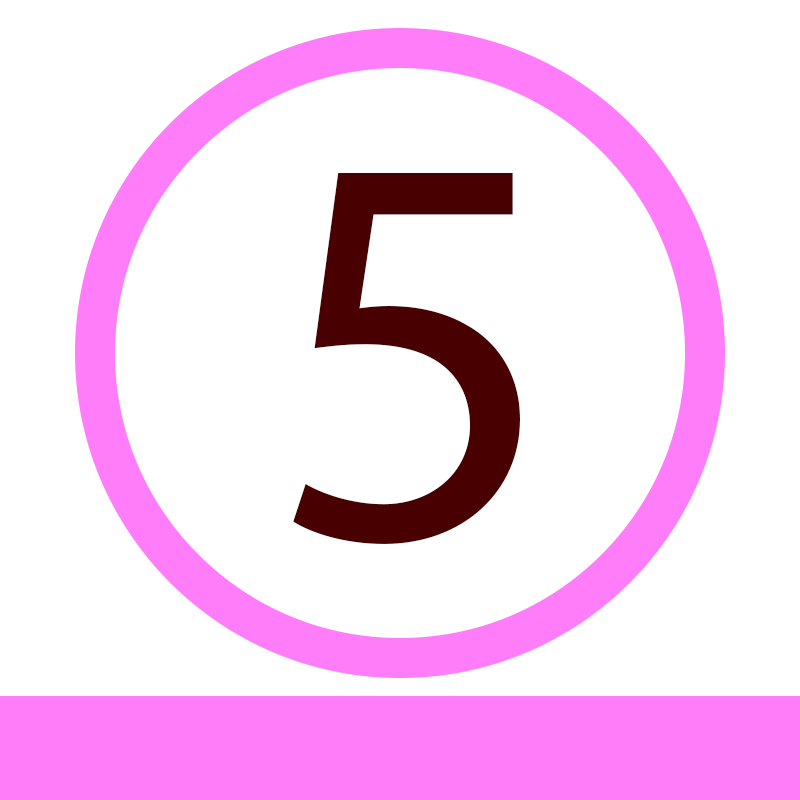
<style>
.page{position:relative;width:800px;height:800px;background:#ffffff}
.page>*{position:absolute;margin:0}
.t1{font:561px "MyriadPro-Regular";color:#480000}
</style>
<div class="page">
<p class="t1" style="left:293px;top:173px;width:227px;height:371px">5</p>
</div>
